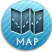
<style>
.page{position:relative;width:52px;height:52px}
.page>*{position:absolute;margin:0}
.t1{font:9px "JosefinSansStd-Light";letter-spacing:0.1em;color:#d7d5d5;text-transform:uppercase;font-weight:bold}
</style>
<div class="page">
<p class="t1" style="left:16px;top:38px;width:22px;height:8px">map</p>
<p class="t1" style="left:16px;top:38px;width:22px;height:8px;opacity:0.6">map</p>
</div>
